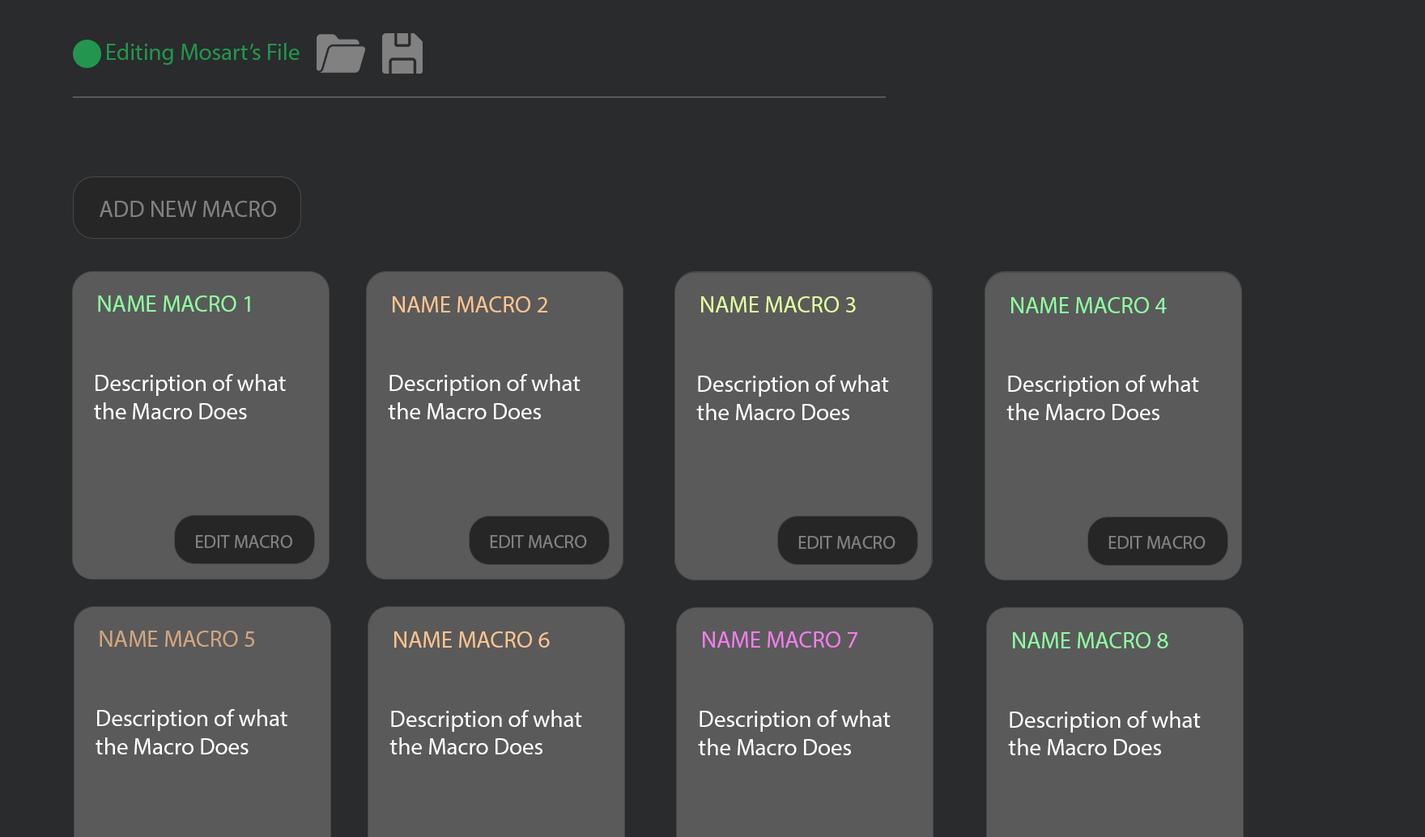
<style>
.page{position:relative;width:1425px;height:837px;background:#292b2d}
.page>*{position:absolute;margin:0}
.t1{font:23.5px "MyriadPro-Regular";color:#24954e}
.t2{font:23.5px "MyriadPro-Regular";color:#818181}
.t3{font:23.5px "MyriadPro-Regular";color:#90ffa2}
.t4{font:23.5px "MyriadPro-Regular";color:#ffc490}
.t5{font:23.5px "MyriadPro-Regular";color:#e5ffa0}
.t6{font:23.5px "MyriadPro-Regular";color:#ffffff}
.t7{font:18.4px "MyriadPro-Regular";color:#818181}
.t8{font:23.5px "MyriadPro-Regular";color:#d2a680}
.t9{font:23.5px "MyriadPro-Regular";color:#f37eec}
</style>
<div class="page">
<p class="t1" style="left:107px;top:43px;width:193px;height:22px">Editing Mosart’s File</p>
<p class="t2" style="left:100px;top:201px;width:176px;height:16px">ADD NEW MACRO</p>
<p class="t3" style="left:98px;top:295px;width:152px;height:17px">NAME MACRO 1</p>
<p class="t4" style="left:393px;top:296px;width:154px;height:16px">NAME MACRO 2</p>
<p class="t5" style="left:701px;top:296px;width:155px;height:16px">NAME MACRO 3</p>
<p class="t3" style="left:1011px;top:297px;width:155px;height:16px">NAME MACRO 4</p>
<p class="t6" style="left:94px;top:374px;width:192px;height:45px">Description of what<br>the Macro Does</p>
<p class="t6" style="left:388px;top:374px;width:192px;height:45px">Description of what<br>the Macro Does</p>
<p class="t6" style="left:696px;top:375px;width:193px;height:45px">Description of what<br>the Macro Does</p>
<p class="t6" style="left:1006px;top:375px;width:193px;height:45px">Description of what<br>the Macro Does</p>
<p class="t7" style="left:196px;top:535px;width:96px;height:13px">EDIT MACRO</p>
<p class="t7" style="left:490px;top:535px;width:97px;height:13px">EDIT MACRO</p>
<p class="t7" style="left:798px;top:536px;width:97px;height:13px">EDIT MACRO</p>
<p class="t7" style="left:1108px;top:536px;width:97px;height:13px">EDIT MACRO</p>
<p class="t8" style="left:100px;top:631px;width:154px;height:16px">NAME MACRO 5</p>
<p class="t4" style="left:394px;top:631px;width:156px;height:17px">NAME MACRO 6</p>
<p class="t9" style="left:703px;top:631px;width:154px;height:17px">NAME MACRO 7</p>
<p class="t3" style="left:1013px;top:632px;width:155px;height:16px">NAME MACRO 8</p>
<p class="t6" style="left:96px;top:709px;width:191px;height:45px">Description of what<br>the Macro Does</p>
<p class="t6" style="left:389px;top:710px;width:193px;height:44px">Description of what<br>the Macro Does</p>
<p class="t6" style="left:698px;top:710px;width:192px;height:45px">Description of what<br>the Macro Does</p>
<p class="t6" style="left:1008px;top:711px;width:192px;height:44px">Description of what<br>the Macro Does</p>
</div>
